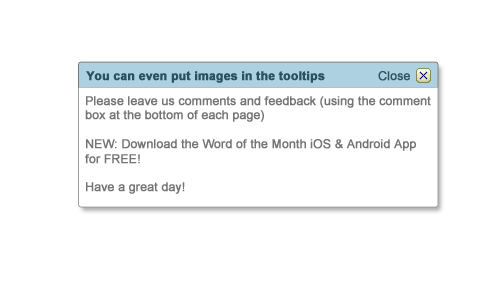
<style>
.page{position:relative;width:492px;height:293px;background:#ffffff}
.page>*{position:absolute;margin:0}
.t1{font:12px "Arial-BoldMT";color:#27535f;font-weight:bold}
.t2{font:12px "ArialMT";color:#305560;font-weight:bold}
.t3{font:12px "ArialMT";color:#747474;font-weight:bold}
</style>
<div class="page">
<p class="t1" style="left:86px;top:71px;width:239px;height:12px">You can even put images in the tooltips</p>
<p class="t2" style="left:378px;top:71px;width:32px;height:10px">Close</p>
<p class="t3" style="left:85px;top:96px;width:346px;height:98px">Please leave us comments and feedback (using the comment<br>box at the bottom of each page) <br><br>NEW: Download the Word of the Month iOS &amp; Android App <br>for FREE!<br><br>Have a great day!</p>
</div>
